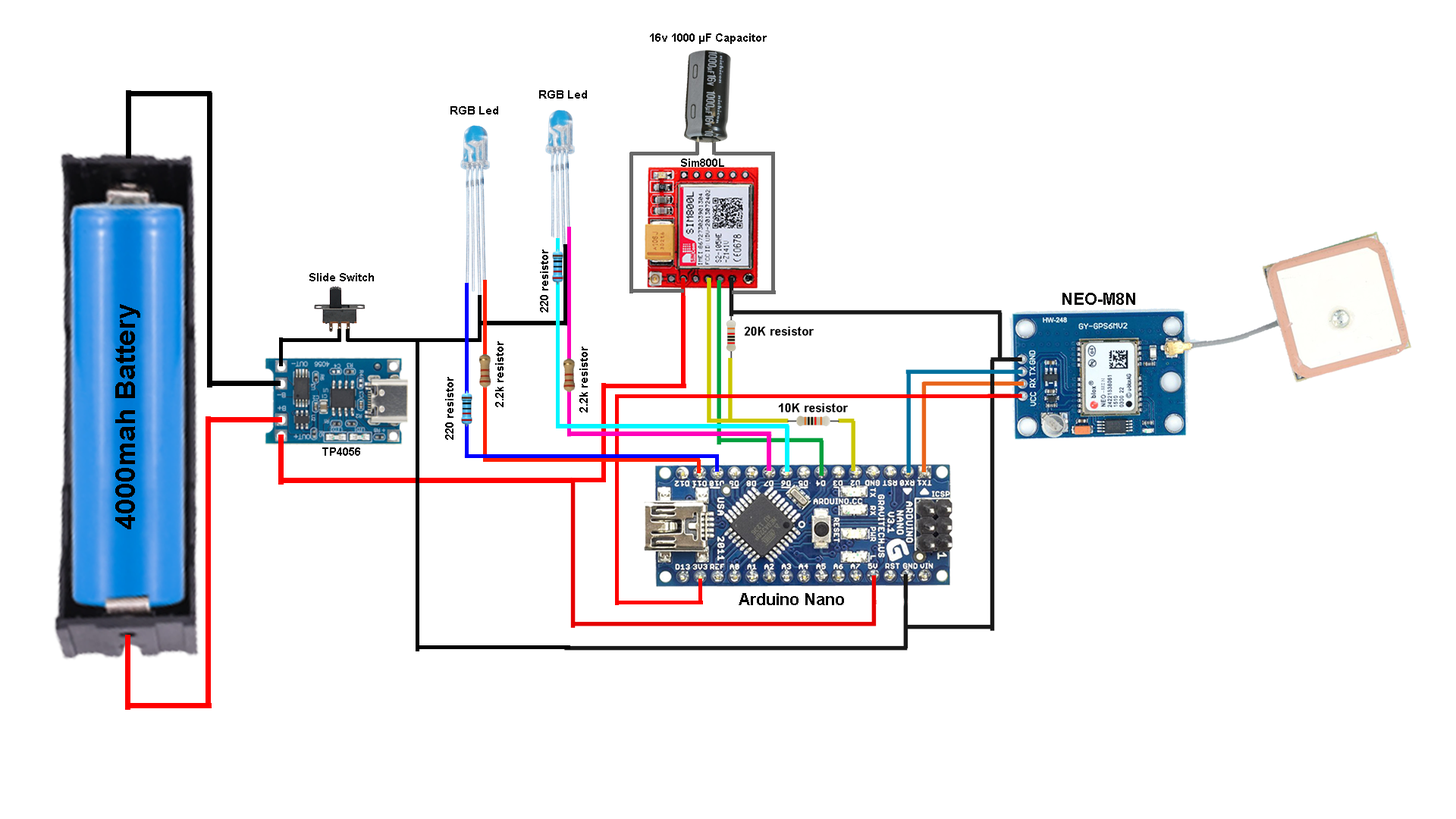
<style>
.page{position:relative;width:1456px;height:819px;background:#ffffff}
.page>*{position:absolute;margin:0}
.t1{font:11px "Arial-BoldMT";color:#000000}
.t2{font:11.1px "Arial-BoldMT";color:#000000}
.t3{font:16.3px "Arial-BoldMT";color:#000000}
.t4{font:27.3px "Arial-BoldMT";color:#000000}
.t5{font:5.4px "Arial-BoldMT";color:#aab6c2;scale:1.05 1}
</style>
<div class="page">
<p class="t1" style="left:650px;top:33px;width:117px;height:11px">16v 1000 µF Capacitor</p>
<p class="t1" style="left:539px;top:90px;width:48px;height:9px">RGB Led</p>
<p class="t1" style="left:450px;top:106px;width:48px;height:9px">RGB Led</p>
<p class="t2" style="left:681px;top:158px;width:43px;height:9px">Sim800L</p>
<p class="t2" style="left:540px;top:249px;width:8px;height:63px;rotate:-90deg">220 resistor</p>
<p class="t1" style="left:309px;top:273px;width:65px;height:8px">Slide Switch</p>
<p class="t3" style="left:1062px;top:293px;width:73px;height:12px">NEO-M8N</p>
<p class="t4" style="left:115px;top:304px;width:25px;height:225px;rotate:-90deg">4000mah Battery</p>
<p class="t1" style="left:495px;top:341px;width:9px;height:66px;rotate:-90deg">2.2k resistor</p>
<p class="t1" style="left:579px;top:347px;width:9px;height:66px;rotate:-90deg">2.2k resistor</p>
<p class="t2" style="left:445px;top:377px;width:8px;height:63px;rotate:-90deg">220 resistor</p>
<p class="t5" style="left:1101px;top:378px;width:4px;height:15px;rotate:-90deg">-M8N</p>
<p class="t1" style="left:322px;top:447px;width:38px;height:9px">TP4056</p>
<p class="t3" style="left:739px;top:593px;width:105px;height:12px">Arduino Nano</p>
</div>
